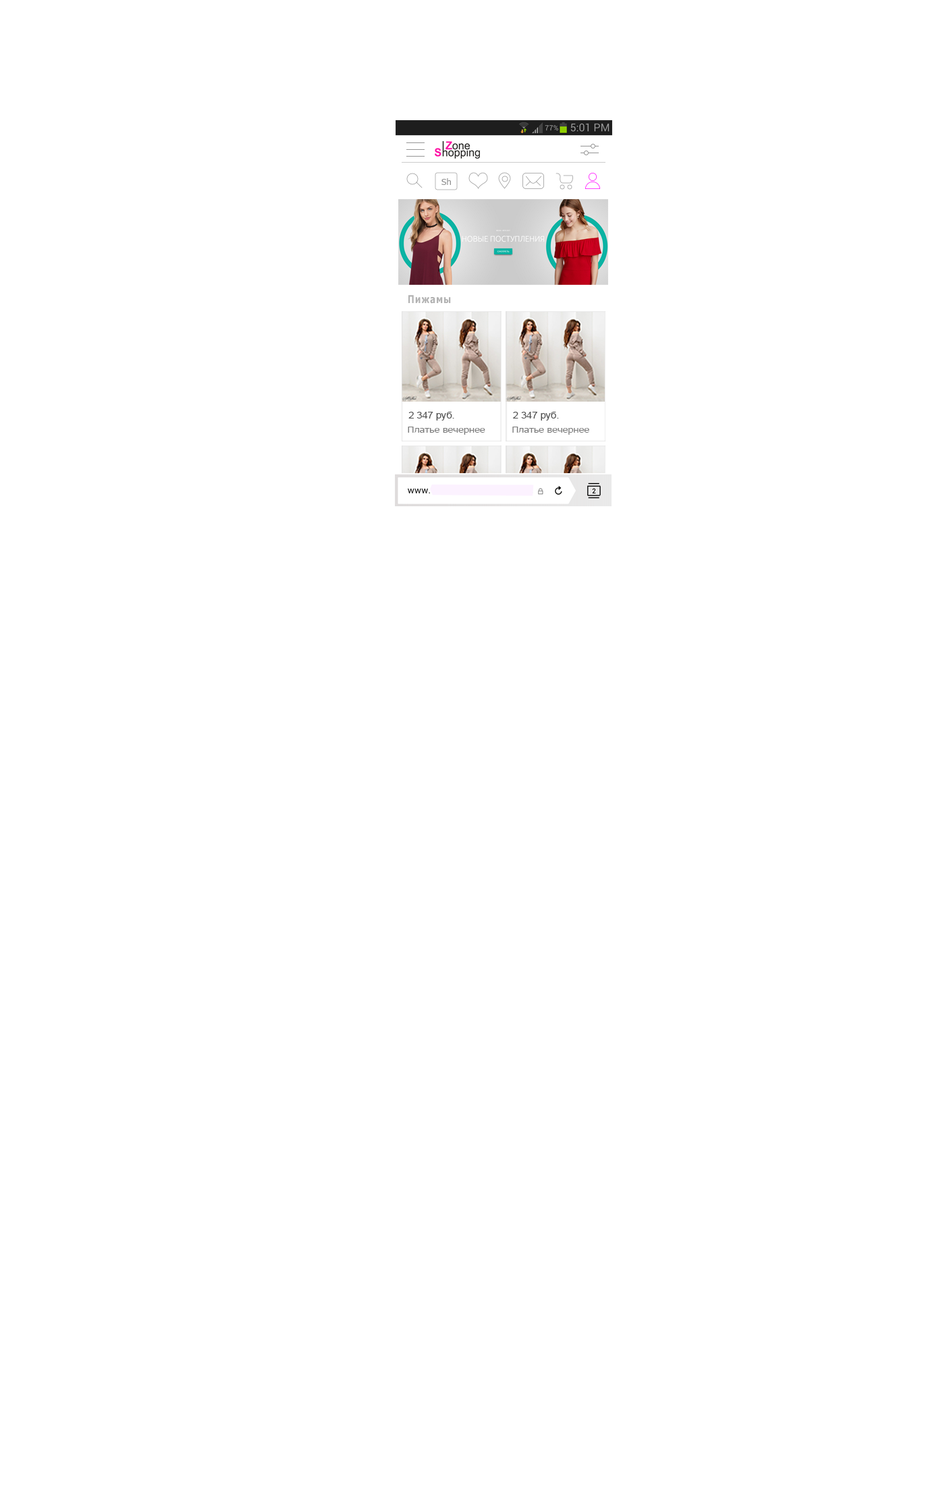
<style>
.page{position:relative;width:945px;height:1485px;background:#ffffff}
.page>*{position:absolute;margin:0}
.t1{font:9px "Tahoma";color:#959595}
.t2{font:10.8px "Tahoma-Bold";letter-spacing:0.1em;color:#b2b2b2;scale:0.8 1}
.t3{font:9px "ArialMT";color:#515151;scale:1.1 1}
.t4{font:9px "Tahoma";color:#7a7a7a;scale:1.1 1}
</style>
<div class="page">
<p class="t1" style="left:441px;top:178px;width:10px;height:7px">Sh</p>
<p class="t2" style="left:408px;top:295px;width:43px;height:9px">Пижамы</p>
<p class="t3" style="left:408px;top:412px;width:46px;height:8px">2 347 руб.</p>
<p class="t3" style="left:513px;top:412px;width:46px;height:8px">2 347 руб.</p>
<p class="t4" style="left:408px;top:427px;width:77px;height:8px">Платье вечернее</p>
<p class="t4" style="left:512px;top:427px;width:77px;height:8px">Платье вечернее</p>
</div>
